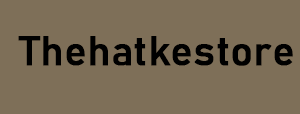
<style>
.page{position:relative;width:300px;height:114px;background:#7e6f58}
.page>*{position:absolute;margin:0}
.t1{font:70px "Bahnschrift";color:#000000;font-weight:bold}
</style>
<div class="page">
<p class="t1" style="left:18px;top:36px;width:275px;height:30px">Thehatkestore</p>
</div>
